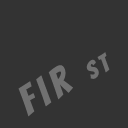
<style>
.page{position:relative;width:128px;height:128px;background:#333333}
.page>*{position:absolute;margin:0}
.t1{font:40px "Bangers-Regular";letter-spacing:0.16em;color:#717171}
.t2{font:24px "Bangers-Regular";letter-spacing:0.16em;color:#717171}
</style>
<div class="page">
<p class="t1" style="left:18px;top:52px;width:92px;height:65px;rotate:-30deg">Fir <span class="t2">ST</span></p>
</div>
